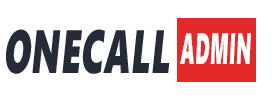
<style>
.page{position:relative;width:273px;height:100px;background:#ffffff}
.page>*{position:absolute;margin:0}
.t1{font:61px "SegoeUIBlack";letter-spacing:0.025em;color:#252b37;font-style:italic;scale:0.58 1}
</style>
<div class="page">
<p class="t1" style="left:6px;top:29px;width:164px;height:45px">ONECALL</p>
</div>
